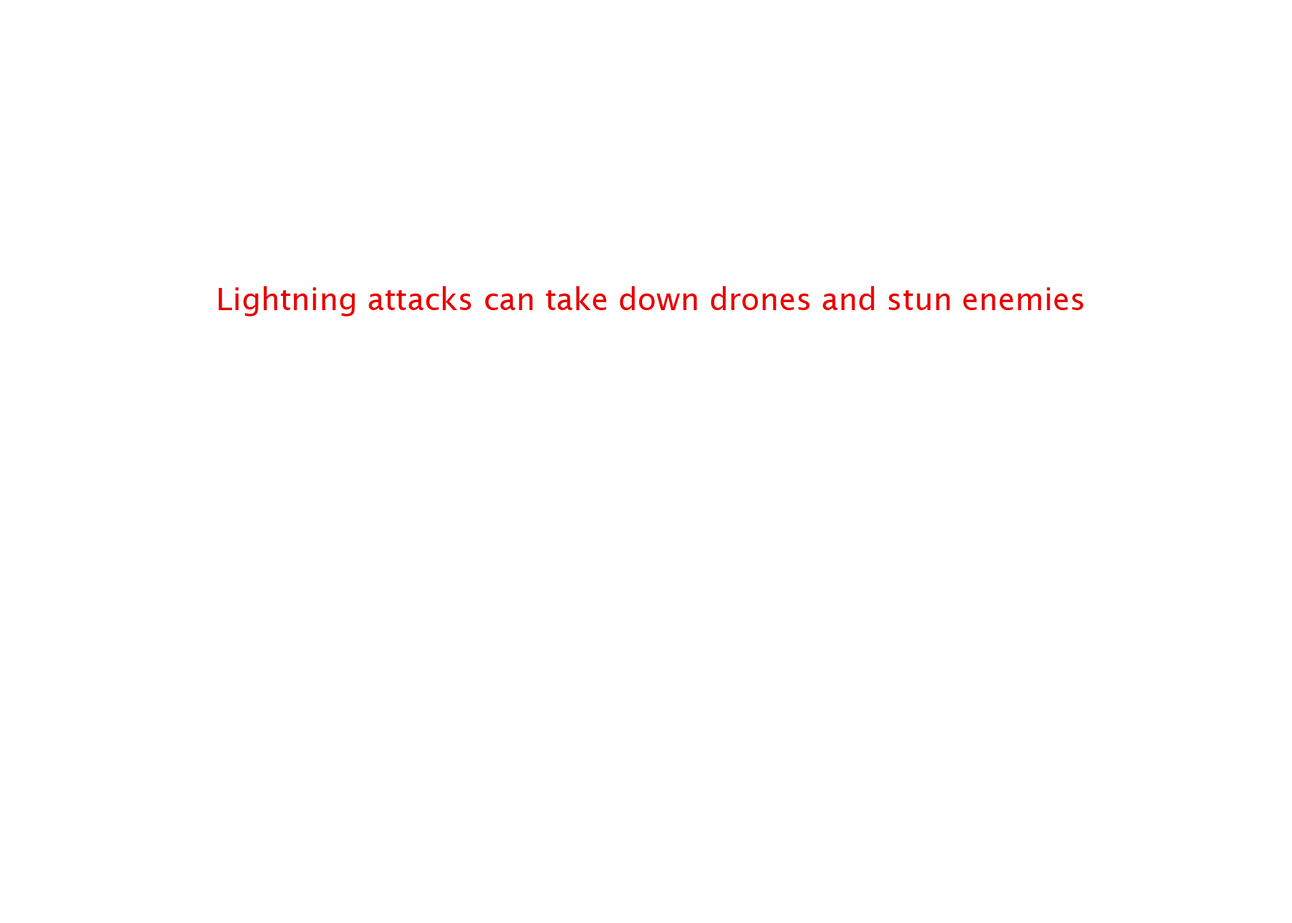
<style>
.page{position:relative;width:1292px;height:923px;background:#ffffff}
.page>*{position:absolute;margin:0}
.t1{font:30.8px "LucidaSans";color:#e80000}
</style>
<div class="page">
<p class="t1" style="left:218px;top:286px;width:865px;height:30px">Lightning attacks can take down drones and stun enemies</p>
</div>
